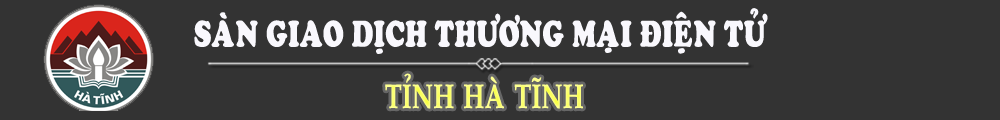
<style>
.page{position:relative;width:1000px;height:120px;background:#333333}
.page>*{position:absolute;margin:0}
.t1{font:36.3px "VNI-Cooper-Heavy";color:#f9f8fd;text-transform:uppercase;scale:0.7 1}
.t2{font:34.1px "VNI-Palatin-Bold";text-transform:uppercase;scale:0.74 1}
</style>
<div class="page">
<p class="t1" style="left:194px;top:8px;width:574px;height:46px">Saøn giao dòch thöông maïi ñieän töû</p>
<p class="t2" style="left:385px;top:73px;width:198px;height:36px">tænh haø tónh</p>
</div>
